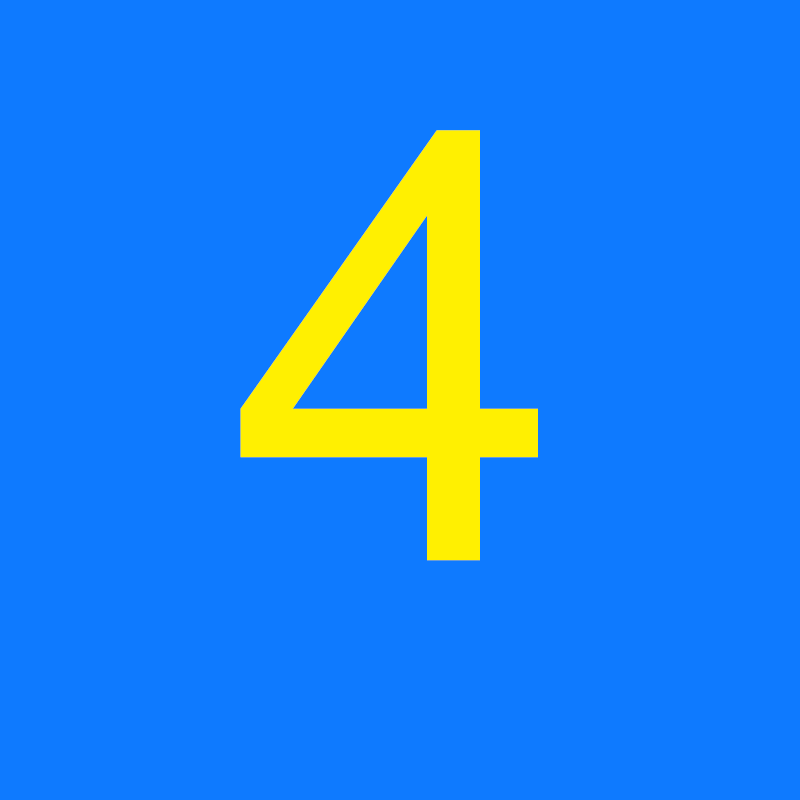
<style>
.page{position:relative;width:800px;height:800px;background:#0e7aff}
.page>*{position:absolute;margin:0}
.t1{font:600.2px "ArialMT";color:#fff001}
</style>
<div class="page">
<p class="t1" style="left:240px;top:130px;width:298px;height:431px">4</p>
</div>
